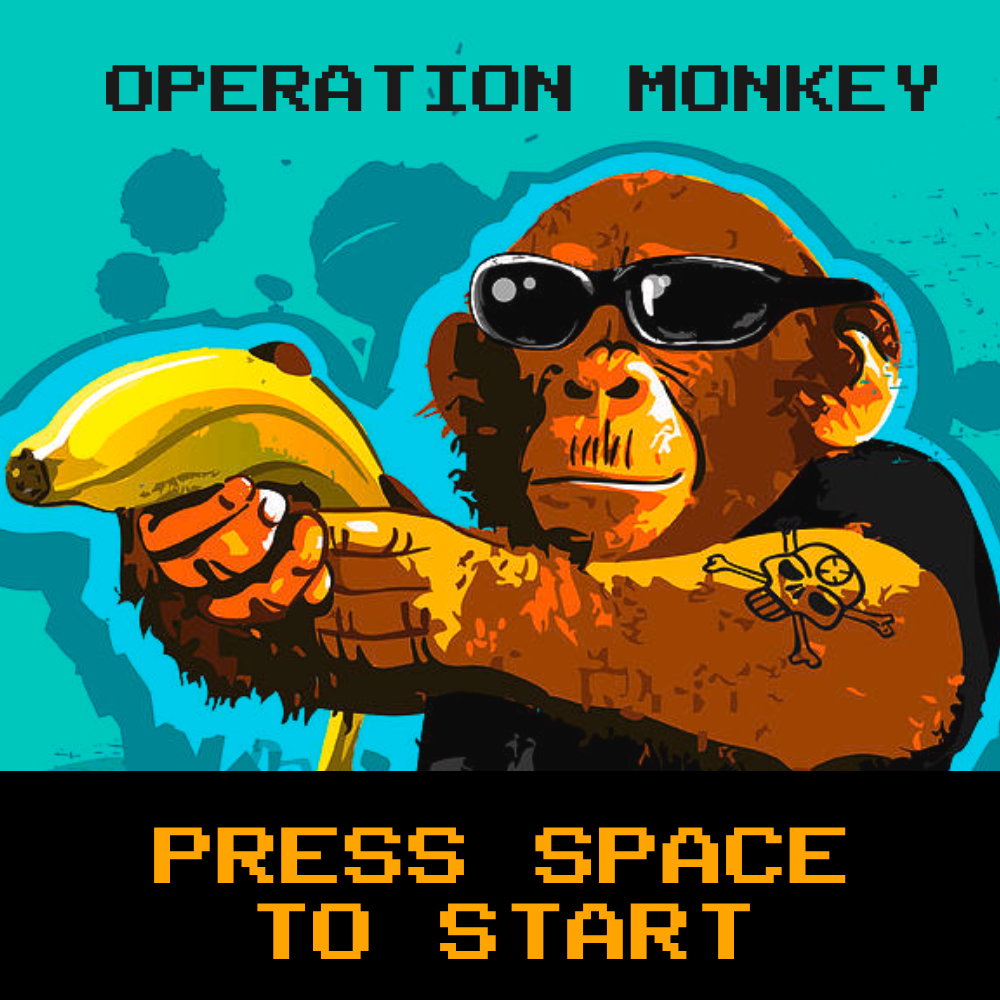
<style>
.page{position:relative;width:1000px;height:1000px}
.page>*{position:absolute;margin:0}
.t1{font:52.3px "PublicPixel";color:#1b1a1a}
.t2{font:63.6px "PublicPixel";color:#ffa400}
</style>
<div class="page">
<p class="t1" style="left:105px;top:65px;width:832px;height:47px">OPERATION MONKEY</p>
<p class="t2" style="left:154px;top:827px;width:692px;height:133px;text-align:center">PRESS SPACE<br>TO START</p>
</div>
